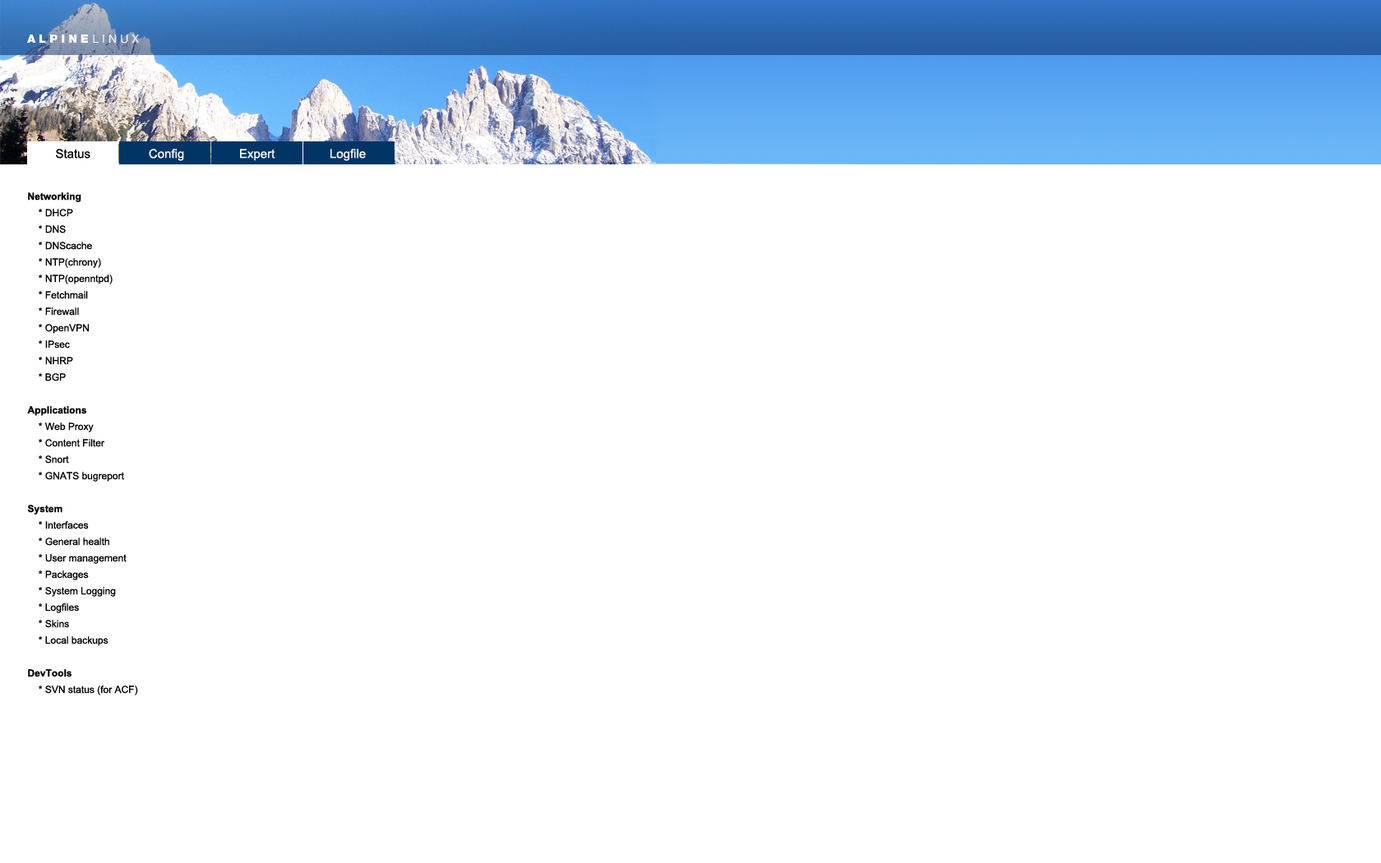
<style>
.page{position:relative;width:1381px;height:863px;background:#ffffff}
.page>*{position:absolute;margin:0}
.t1{font:11.5px "HelveticaNeueLTStd-Blk";letter-spacing:0.3em;color:#ffffff}
.t2{font:11.5px "HelveticaNeueLTStd-Roman";letter-spacing:0.3em;color:#ffffff}
.t3{font:12.3px "ArialMT";color:#fffefe}
.t4{font:12.3px "ArialMT";color:#000000}
.t5{font:9.9px/16.4px "ArialMT";color:#000000}
.t6{font:9.9px/16.4px "Arial-BoldMT";color:#000000}
</style>
<div class="page">
<p class="t1" style="left:27px;top:35px;width:112px;height:9px">ALPINE<span class="t2">LINUX</span></p>
<p class="t3" style="left:56px;top:149px;width:310px;height:12px"><span class="t4">Status                 </span>Config                Expert                Logfile</p>
<p class="t5" style="left:27px;top:192px;width:111px;height:504px"><span class="t6">Networking</span><br>    * DHCP<br>    * DNS<br>    * DNScache<br>    * NTP(chrony)<br>    * NTP(openntpd)<br>    * Fetchmail<br>    * Firewall<br>    * OpenVPN<br>    * IPsec<br>    * NHRP<br>    * BGP<br><br><span class="t6">Applications</span><br>    * Web Proxy<br>    * Content Filter<br>    * Snort<br>    * GNATS bugreport<br><br><span class="t6">System</span><br>    * Interfaces<br>    * General health<br>    * User management<br>    * Packages<br>    * System Logging<br>    * Logfiles<br>    * Skins<br>    * Local backups<br><br><span class="t6">DevTools</span><br>    * SVN status (for ACF)</p>
</div>
